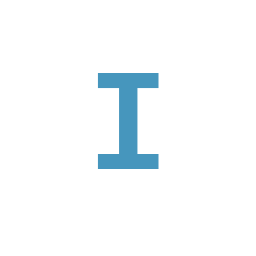
<style>
.page{position:relative;width:256px;height:256px;background:#ffffff}
.page>*{position:absolute;margin:0}
.t1{font:150px "Consolas-Bold";color:#4696bd}
</style>
<div class="page">
<p class="t1" style="left:97px;top:73px;width:62px;height:96px">I</p>
</div>
